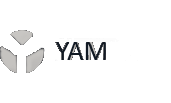
<style>
.page{position:relative;width:171px;height:103px;background:#ffffff}
.page>*{position:absolute;margin:0}
.t1{font:29px "Calibri";letter-spacing:-0.01em;color:#121a24}
</style>
<div class="page">
<p class="t1" style="left:56px;top:42px;width:50px;height:18px">YAM</p>
</div>
